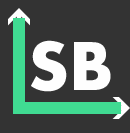
<style>
.page{position:relative;width:130px;height:133px;background:#333333}
.page>*{position:absolute;margin:0}
.t1{font:63.5px "Futura-Bold";color:#fefefe}
</style>
<div class="page">
<p class="t1" style="left:31px;top:40px;width:80px;height:52px">SB</p>
</div>
